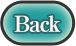
<style>
.page{position:relative;width:76px;height:46px}
.page>*{position:absolute;margin:0}
.t1{font:22px "RyuminPro-ExBold";letter-spacing:-0.08em;color:#fdfbf9}
</style>
<div class="page">
<p class="t1" style="left:14px;top:15px;width:47px;height:17px">Back</p>
</div>
